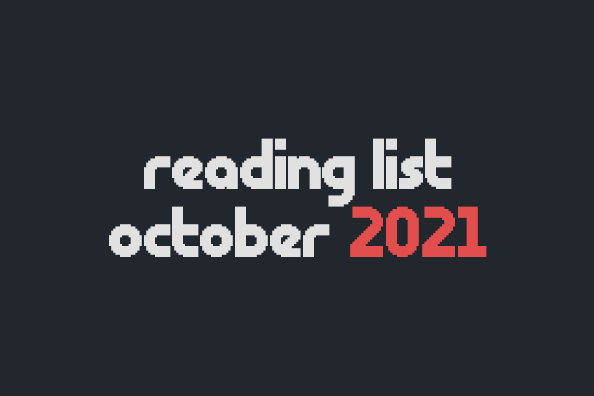
<style>
.page{position:relative;width:594px;height:396px;background:#22272e}
.page>*{position:absolute;margin:0}
.t1{font:72px "ChevyRay---Roundabout";color:#e1e1e1}
.t2{font:72px "ChevyRay---Roundabout";color:#e24e4e}
</style>
<div class="page">
<p class="t1" style="left:144px;top:138px;width:308px;height:69px">reading list</p>
<p class="t1" style="left:109px;top:206px;width:378px;height:51px">october <span class="t2">2021</span></p>
</div>
